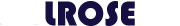
<style>
.page{position:relative;width:180px;height:26px;background:#ffffff}
.page>*{position:absolute;margin:0}
.t1{font:36px "Bauhaus93";color:#150f42}
</style>
<div class="page">
<p class="t1" style="left:45px;top:1px;width:90px;height:25px">LROSE</p>
</div>
